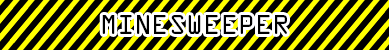
<style>
.page{position:relative;width:389px;height:50px;background:#000000}
.page>*{position:absolute;margin:0}
.t1{font:24px "OCRAStd";color:#000000}
</style>
<div class="page">
<p class="t1" style="left:102px;top:15px;width:185px;height:19px">MINESWEEPER</p>
</div>
